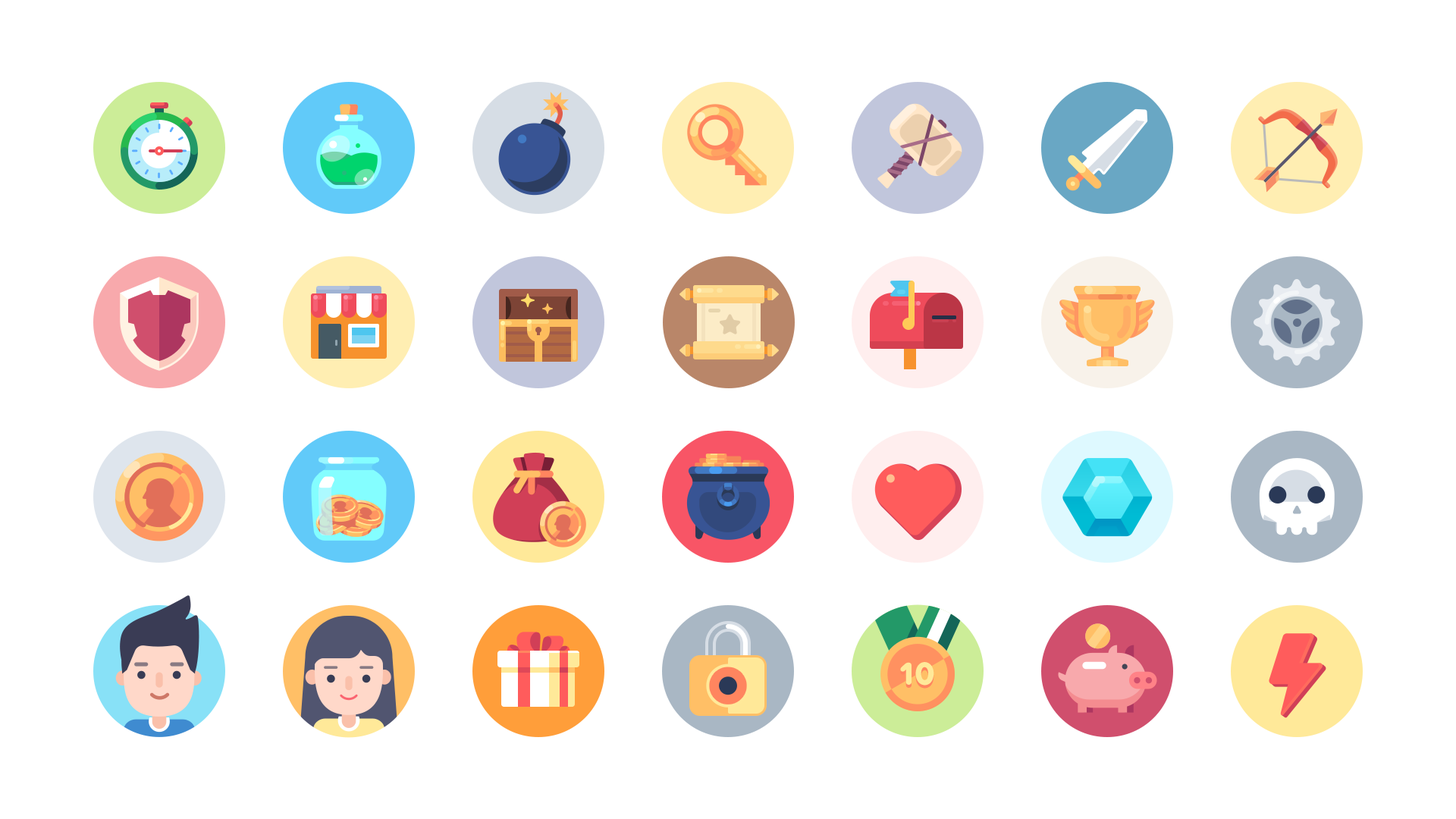
<style>
.page{position:relative;width:1456px;height:819px;background:#ffffff}
.page>*{position:absolute;margin:0}
.t1{font:34.2px "VolteRounded-Bold";color:#ffe999}
</style>
<div class="page">
<p class="t1" style="left:900px;top:665px;width:34px;height:24px">10</p>
<p class="t1" style="left:900px;top:662px;width:34px;height:24px">10</p>
</div>
